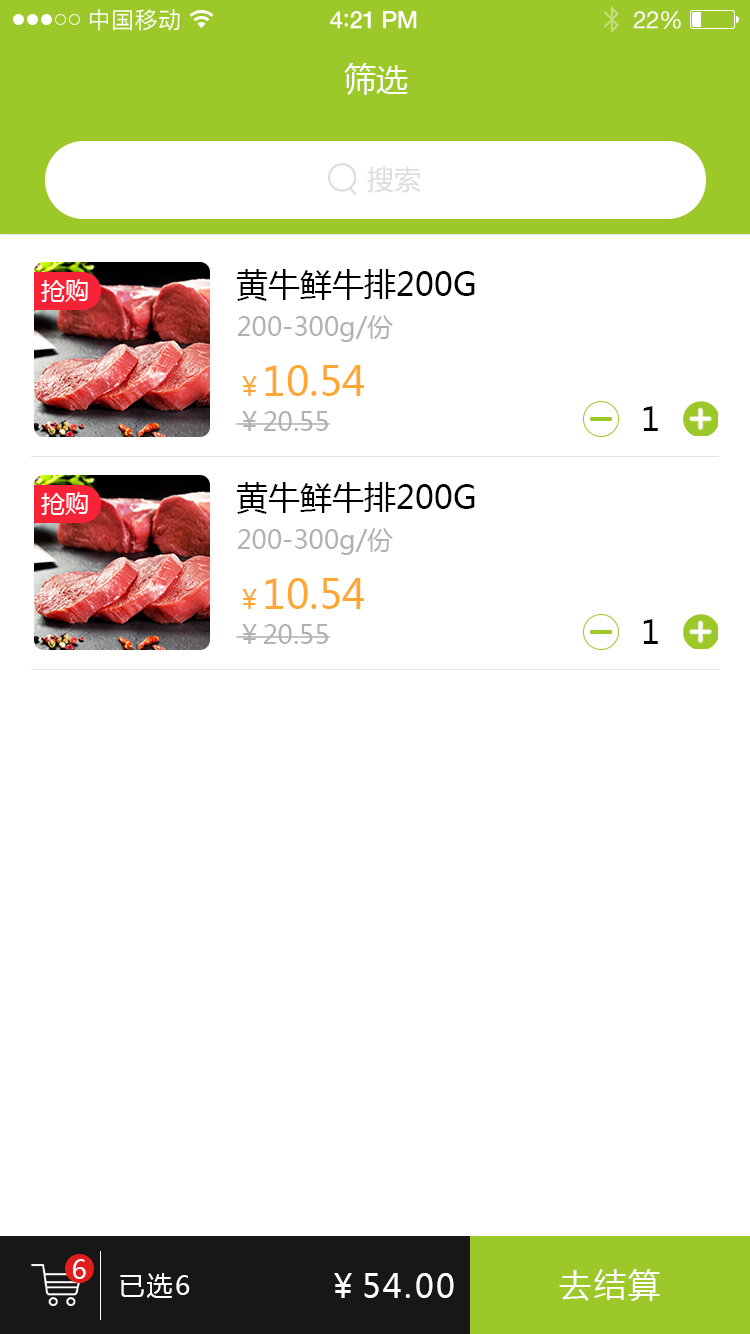
<style>
.page{position:relative;width:750px;height:1334px;background:#ffffff}
.page>*{position:absolute;margin:0}
.t1{font:23px "PingFangSC-Regular";letter-spacing:0.02em;color:#ffffff}
.t2{font:24px "HelveticaNeue-Medium";letter-spacing:-0.02em;color:#ffffff}
.t3{font:26px "Avenir-Medium";letter-spacing:-0.02em;color:#ffffff}
.t4{font:24px "HelveticaNeue";letter-spacing:-0.02em;color:#ffffff}
.t5{font:32px "MicrosoftYaHei";color:#ffffff;text-transform:uppercase}
.t6{font:26.9px "MicrosoftYaHei";color:#dddddd;text-transform:uppercase}
.t7{font:32px "MicrosoftYaHei";color:#000000;text-transform:uppercase}
.t8{font:24px "MicrosoftYaHei";color:#ffffff;text-transform:uppercase}
.t9{font:26px "MicrosoftYaHei";color:#b1b1b1}
.t10{font:40px "MicrosoftYaHei";color:#ffa734}
.t11{font:26px "MicrosoftYaHei";color:#ffa734}
.t12{font:32px "MicrosoftYaHei";letter-spacing:0.08em;color:#000000;text-transform:uppercase}
.t13{font:26px "MicrosoftYaHei";letter-spacing:0.08em;color:#ffffff;text-transform:uppercase}
.t14{font:32px "MicrosoftYaHei";letter-spacing:0.08em;color:#ffffff;text-transform:uppercase}
</style>
<div class="page">
<p class="t1" style="left:90px;top:9px;width:90px;height:22px">中国移动</p>
<p class="t2" style="left:330px;top:11px;width:87px;height:18px">4<span class="t3">:</span>21 PM</p>
<p class="t4" style="left:633px;top:11px;width:48px;height:18px">22%</p>
<p class="t5" style="left:344px;top:63px;width:64px;height:32px">筛选</p>
<p class="t6" style="left:367px;top:166px;width:54px;height:27px">搜索</p>
<p class="t7" style="left:236px;top:269px;width:239px;height:32px">黄牛鲜牛排200g</p>
<p class="t8" style="left:41px;top:279px;width:47px;height:23px">抢购</p>
<p class="t9" style="left:237px;top:315px;width:156px;height:27px">200-300g/份</p>
<p class="t10" style="left:242px;top:365px;width:122px;height:31px"><span class="t11">￥</span>10.54</p>
<p class="t9" style="left:236px;top:411px;width:94px;height:20px">￥20.55</p>
<p class="t12" style="left:643px;top:406px;width:15px;height:25px">1</p>
<p class="t7" style="left:236px;top:482px;width:239px;height:32px">黄牛鲜牛排200g</p>
<p class="t8" style="left:41px;top:492px;width:47px;height:23px">抢购</p>
<p class="t9" style="left:237px;top:528px;width:156px;height:27px">200-300g/份</p>
<p class="t10" style="left:242px;top:578px;width:122px;height:31px"><span class="t11">￥</span>10.54</p>
<p class="t9" style="left:236px;top:624px;width:94px;height:20px">￥20.55</p>
<p class="t12" style="left:643px;top:619px;width:15px;height:25px">1</p>
<p class="t13" style="left:73px;top:1259px;width:13px;height:20px">6</p>
<p class="t13" style="left:120px;top:1273px;width:70px;height:25px">已选6</p>
<p class="t14" style="left:334px;top:1273px;width:120px;height:25px">￥54.00</p>
<p class="t14" style="left:559px;top:1269px;width:101px;height:32px">去结算</p>
</div>
